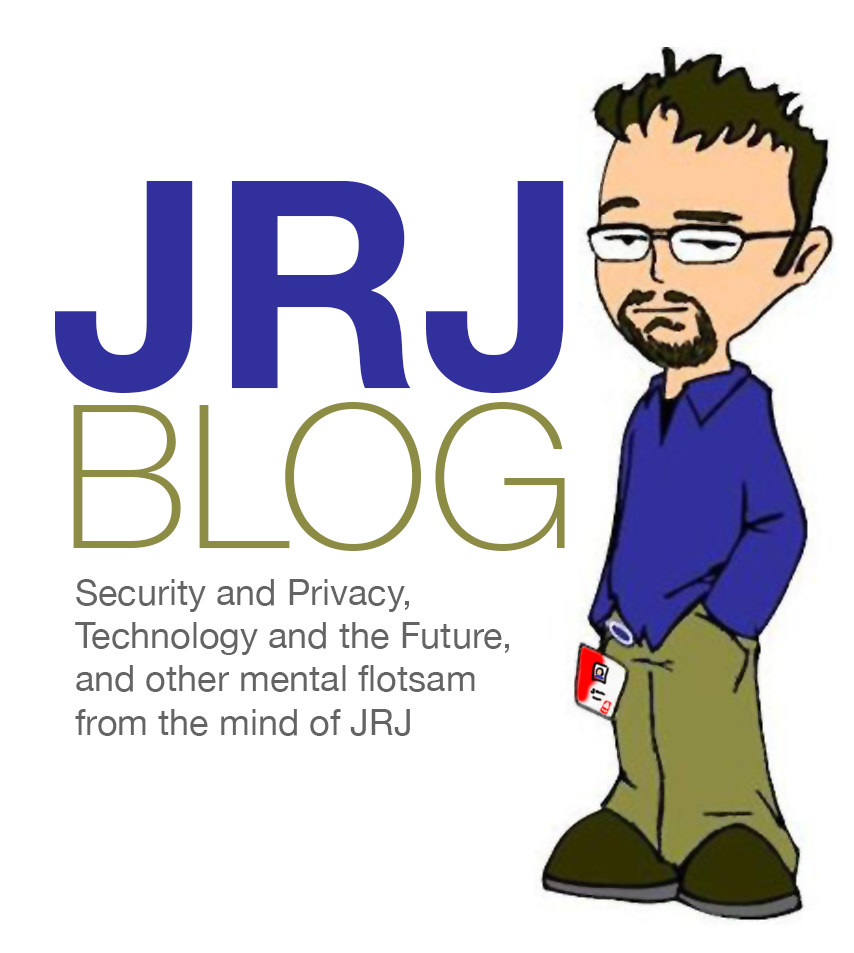
<style>
.page{position:relative;width:854px;height:953px;background:#ffffff}
.page>*{position:absolute;margin:0}
.t1{font:290px "HelveticaNeue-Bold";color:#32309d}
.t2{font:200px "HelveticaNeue-Thin";color:#8c8c44}
.t3{font:36px "HelveticaNeue";color:#646464}
</style>
<div class="page">
<p class="t1" style="left:55px;top:181px;width:509px;height:212px">JRJ</p>
<p class="t2" style="left:73px;top:402px;width:492px;height:149px">BLOG</p>
<p class="t3" style="left:75px;top:579px;width:434px;height:157px">Security and Privacy,<br>Technology and the Future, <br>and other mental flotsam<br>from the mind of JRJ</p>
</div>
